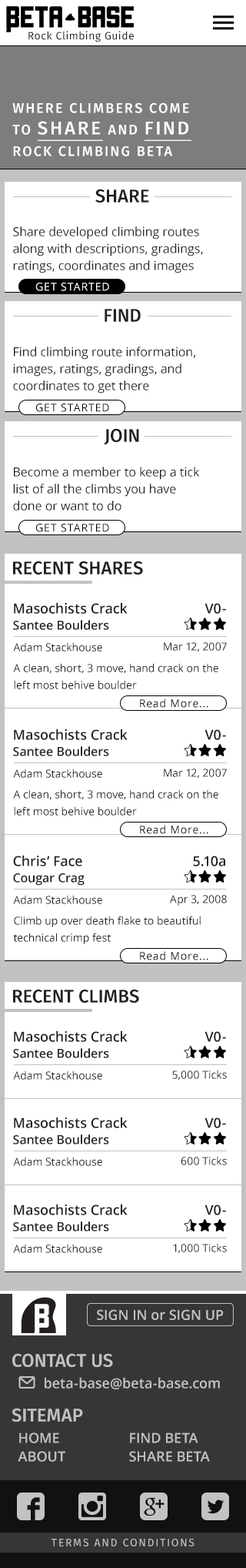
<style>
.page{position:relative;width:246px;height:1568px;background:#ffffff}
.page>*{position:absolute;margin:0}
.t1{font:10.8px "FiraSans-Regular";letter-spacing:0.04em;color:#231f20}
.t2{font:13.9px/21.6px "FiraSans-Medium";letter-spacing:0.12em;color:#ffffff;text-transform:uppercase}
.t3{font:18.5px/21.6px "FiraSans-Medium";letter-spacing:0.12em;color:#ffffff;text-transform:uppercase;text-decoration:underline}
.t4{font:18.5px/21.6px "FiraSans-Medium";letter-spacing:0.12em;color:#ffffff;text-transform:uppercase}
.t5{font:18.5px "FiraSans-Medium";color:#231f20}
.t6{font:12.3px/16.9px "OpenSans";color:#231f20}
.t7{font:10.8px "OpenSans";letter-spacing:0.06em;color:#ffffff}
.t8{font:10.8px "OpenSans";letter-spacing:0.06em;color:#000000}
.t9{font:13.9px "OpenSans-Semibold";color:#231f20}
.t10{font:12.3px "OpenSans-Semibold";color:#231f20}
.t11{font:10.8px "OpenSans";color:#231f20}
.t12{font:10.8px/16.9px "OpenSans";color:#231f20}
.t13{font:13.9px "OpenSans-Semibold";color:#c2c2c2}
.t14{font:18.5px "FiraSans-Medium";color:#c2c2c2}
.t15{font:13.9px/18.5px "OpenSans-Semibold";color:#c2c2c2}
.t16{font:10.8px "FiraSans-Regular";letter-spacing:0.12em;color:#c2c2c2;text-transform:uppercase}
</style>
<div class="page">
<p class="t1" style="left:28px;top:31px;width:106px;height:11px">Rock Climbing Guide</p>
<p class="t2" style="left:12px;top:102px;width:180px;height:54px">Where climbers come <br>to <span class="t3">share </span>and <span class="t3">find</span><span class="t4"><br></span>Rock climbing beta</p>
<p class="t5" style="left:95px;top:189px;width:54px;height:14px">SHARE</p>
<p class="t6" style="left:13px;top:226px;width:190px;height:47px">Share developed climbing routes<br>along with descriptions, gradings,<br>ratings, coordinates and images</p>
<p class="t7" style="left:35px;top:283px;width:74px;height:8px">GET STARTED</p>
<p class="t5" style="left:105px;top:309px;width:36px;height:13px">FIND</p>
<p class="t6" style="left:13px;top:347px;width:183px;height:47px">Find climbing route information,<br>images, ratings, gradings, and<br>coordinates to get there</p>
<p class="t8" style="left:35px;top:404px;width:74px;height:8px">GET STARTED</p>
<p class="t5" style="left:104px;top:428px;width:35px;height:17px">JOIN</p>
<p class="t6" style="left:13px;top:467px;width:187px;height:44px">Become a member to keep a tick<br>list of all the climbs you have <br>done or want to do</p>
<p class="t8" style="left:35px;top:524px;width:74px;height:8px">GET STARTED</p>
<p class="t5" style="left:13px;top:561px;width:130px;height:14px">RECENT SHARES</p>
<p class="t9" style="left:14px;top:602px;width:114px;height:12px">Masochists Crack</p>
<p class="t9" style="left:205px;top:603px;width:21px;height:11px">V0-</p>
<p class="t10" style="left:13px;top:620px;width:96px;height:10px">Santee Boulders</p>
<p class="t11" style="left:13px;top:642px;width:89px;height:10px">Adam Stackhouse</p>
<p class="t11" style="left:164px;top:642px;width:63px;height:10px">Mar 12, 2007</p>
<p class="t12" style="left:13px;top:663px;width:206px;height:26px">A clean, short, 3 move, hand crack on the <br>left most behive boulder</p>
<p class="t8" style="left:140px;top:699px;width:69px;height:9px">Read More...</p>
<p class="t9" style="left:14px;top:729px;width:114px;height:11px">Masochists Crack</p>
<p class="t9" style="left:205px;top:729px;width:21px;height:11px">V0-</p>
<p class="t10" style="left:13px;top:746px;width:96px;height:10px">Santee Boulders</p>
<p class="t11" style="left:13px;top:769px;width:89px;height:9px">Adam Stackhouse</p>
<p class="t11" style="left:164px;top:769px;width:63px;height:10px">Mar 12, 2007</p>
<p class="t12" style="left:13px;top:789px;width:206px;height:27px">A clean, short, 3 move, hand crack on the <br>left most behive boulder</p>
<p class="t8" style="left:140px;top:825px;width:69px;height:9px">Read More...</p>
<p class="t9" style="left:13px;top:855px;width:69px;height:11px">Chris’ Face</p>
<p class="t9" style="left:193px;top:856px;width:33px;height:10px">5.10a</p>
<p class="t10" style="left:13px;top:873px;width:72px;height:13px">Cougar Crag</p>
<p class="t11" style="left:13px;top:895px;width:89px;height:9px">Adam Stackhouse</p>
<p class="t11" style="left:170px;top:895px;width:57px;height:11px">Apr 3, 2008</p>
<p class="t12" style="left:13px;top:916px;width:188px;height:28px">Climb up over death flake to beautiful<br>technical crimp fest</p>
<p class="t8" style="left:140px;top:951px;width:69px;height:9px">Read More...</p>
<p class="t5" style="left:13px;top:989px;width:126px;height:14px">RECENT CLIMBS</p>
<p class="t9" style="left:14px;top:1030px;width:114px;height:12px">Masochists Crack</p>
<p class="t9" style="left:205px;top:1031px;width:21px;height:11px">V0-</p>
<p class="t10" style="left:13px;top:1048px;width:96px;height:10px">Santee Boulders</p>
<p class="t11" style="left:13px;top:1070px;width:89px;height:10px">Adam Stackhouse</p>
<p class="t11" style="left:173px;top:1070px;width:54px;height:11px">5,000 Ticks</p>
<p class="t9" style="left:14px;top:1117px;width:114px;height:11px">Masochists Crack</p>
<p class="t9" style="left:205px;top:1117px;width:21px;height:11px">V0-</p>
<p class="t10" style="left:13px;top:1134px;width:96px;height:10px">Santee Boulders</p>
<p class="t11" style="left:13px;top:1157px;width:89px;height:9px">Adam Stackhouse</p>
<p class="t11" style="left:181px;top:1156px;width:46px;height:9px">600 Ticks</p>
<p class="t9" style="left:14px;top:1204px;width:114px;height:11px">Masochists Crack</p>
<p class="t9" style="left:205px;top:1204px;width:21px;height:11px">V0-</p>
<p class="t10" style="left:13px;top:1221px;width:96px;height:10px">Santee Boulders</p>
<p class="t11" style="left:13px;top:1244px;width:89px;height:9px">Adam Stackhouse</p>
<p class="t11" style="left:173px;top:1243px;width:54px;height:11px">1,000 Ticks</p>
<p class="t13" style="left:97px;top:1309px;width:127px;height:11px">SIGN IN or SIGN UP</p>
<p class="t14" style="left:12px;top:1353px;width:101px;height:14px">CONTACT US</p>
<p class="t13" style="left:45px;top:1377px;width:175px;height:12px">beta-base@beta-base.com</p>
<p class="t14" style="left:12px;top:1408px;width:71px;height:14px">SITEMAP</p>
<p class="t15" style="left:18px;top:1432px;width:47px;height:30px">HOME<br>ABOUT</p>
<p class="t15" style="left:129px;top:1432px;width:81px;height:30px">FIND BETA<br>SHARE BETA</p>
<p class="t16" style="left:52px;top:1539px;width:143px;height:7px">Terms and Conditions</p>
</div>
